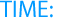
<style>
.page{position:relative;width:57px;height:19px;background:#ffffff}
.page>*{position:absolute;margin:0}
.t1{font:24px "MyriadPro-Regular";color:#0099ff}
</style>
<div class="page">
<p class="t1" style="left:0px;top:0px;width:53px;height:18px">TIME:</p>
</div>
